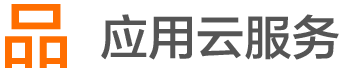
<style>
.page{position:relative;width:360px;height:73px;background:#ffffff}
.page>*{position:absolute;margin:0}
.t1{font:72px "FZLTZHK--GBK1-0";color:#ff6e00}
.t2{font:48px "FZLTZHK--GBK1-0";color:#555555}
</style>
<div class="page">
<p class="t1" style="left:5px;top:4px;width:62px;height:64px">品</p>
<p class="t2" style="left:101px;top:14px;width:238px;height:46px">应用云服务</p>
</div>
